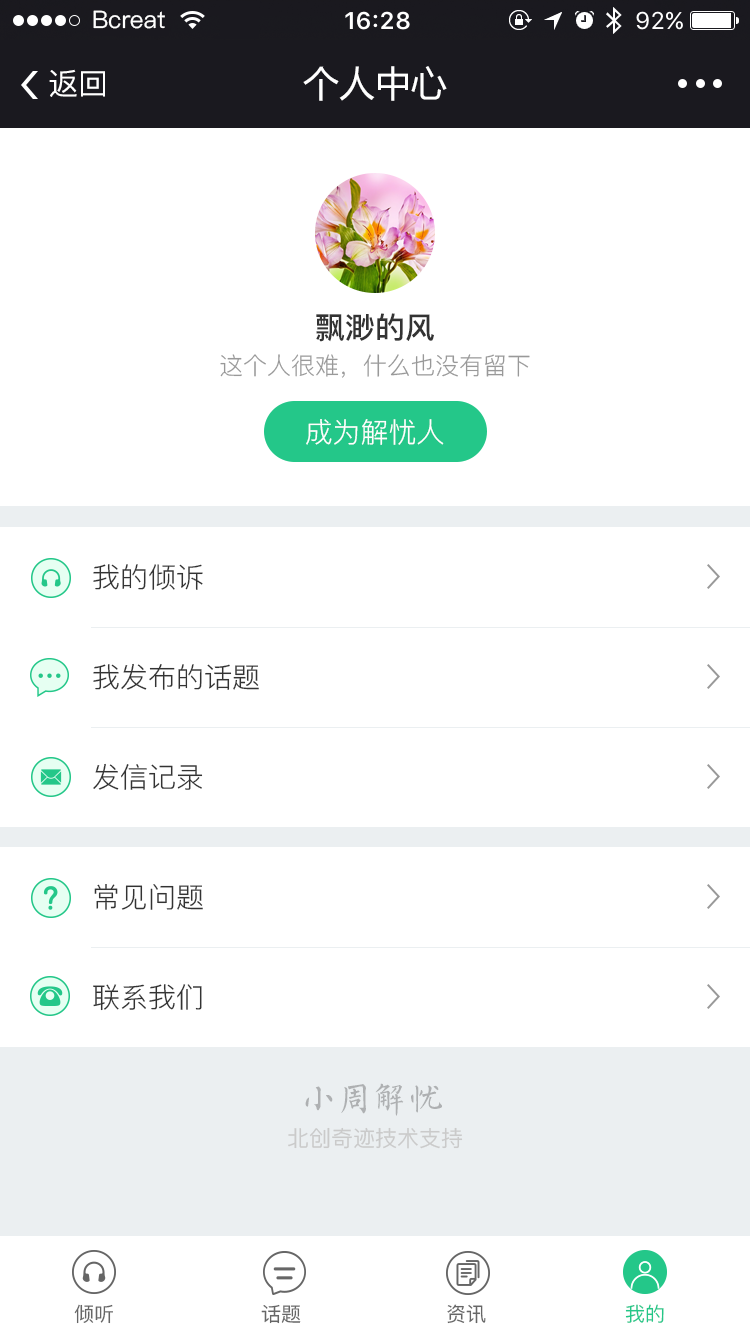
<style>
.page{position:relative;width:750px;height:1334px;background:#ffffff}
.page>*{position:absolute;margin:0}
.t1{font:24px "PingFang-SC-Medium";color:#ffffff}
.t2{font:30px "PingFang-SC-Medium";color:#ffffff}
.t3{font:36px "MicrosoftYaHei";color:#ffffff}
.t4{font:30px "PingFang-SC-Bold";color:#333333}
.t5{font:24px "PingFang-SC-Regular";color:#999999}
.t6{font:28px "PingFang-SC-Regular";color:#ffffff}
.t7{font:28px "PingFang-SC-Regular";color:#333333}
.t8{font:35.8px "FZSXSLKJW--GB1-0";letter-spacing:-0.005em;color:#aeb0b2}
.t9{font:22px "PingFang-SC-Medium";color:#cacaca}
.t10{font:20px "PingFang-SC-Medium";color:#666666}
.t11{font:20px "PingFang-SC-Medium";color:#24c789}
</style>
<div class="page">
<p class="t1" style="left:93px;top:10px;width:72px;height:19px">Bcreat</p>
<p class="t2" style="left:49px;top:69px;width:56px;height:28px">返回</p>
<p class="t3" style="left:303px;top:66px;width:144px;height:35px">个人中心</p>
<p class="t4" style="left:316px;top:313px;width:118px;height:29px">飘渺的风</p>
<p class="t5" style="left:220px;top:354px;width:310px;height:24px">这个人很难，什么也没有留下</p>
<p class="t6" style="left:306px;top:419px;width:138px;height:26px">成为解忧人</p>
<p class="t7" style="left:93px;top:564px;width:110px;height:26px">我的倾诉</p>
<p class="t7" style="left:93px;top:663px;width:166px;height:27px">我发布的话题</p>
<p class="t7" style="left:93px;top:763px;width:110px;height:27px">发信记录</p>
<p class="t7" style="left:94px;top:884px;width:109px;height:26px">常见问题</p>
<p class="t7" style="left:93px;top:984px;width:109px;height:27px">联系我们</p>
<p class="t8" style="left:305px;top:1083px;width:137px;height:33px">小周解忧</p>
<p class="t9" style="left:288px;top:1127px;width:175px;height:22px">北创奇迹技术支持</p>
<p class="t10" style="left:74px;top:1304px;width:39px;height:20px">倾听</p>
<p class="t10" style="left:261px;top:1304px;width:40px;height:20px">话题</p>
<p class="t10" style="left:447px;top:1304px;width:39px;height:20px">资讯</p>
<p class="t11" style="left:625px;top:1304px;width:39px;height:19px">我的</p>
</div>
